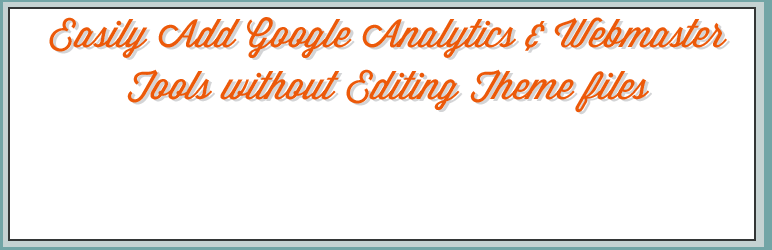
<style>
.page{position:relative;width:772px;height:250px;background:#ffffff}
.page>*{position:absolute;margin:0}
.t1{font:38.8px/52.4px "WisdomScriptAI";color:#ec5909}
.t2{font:38.8px/52.4px "WisdomScriptAI";color:#d3d4d6}
</style>
<div class="page">
<p class="t1" style="left:49px;top:17px;width:678px;height:96px;text-align:center">Easily Add Google Analytics &amp; Webmaster Tools without Editing Theme files</p>
<p class="t2" style="left:52px;top:19px;width:678px;height:96px;text-align:center">Easily Add Google Analytics &amp; Webmaster Tools without Editing Theme files</p>
</div>
